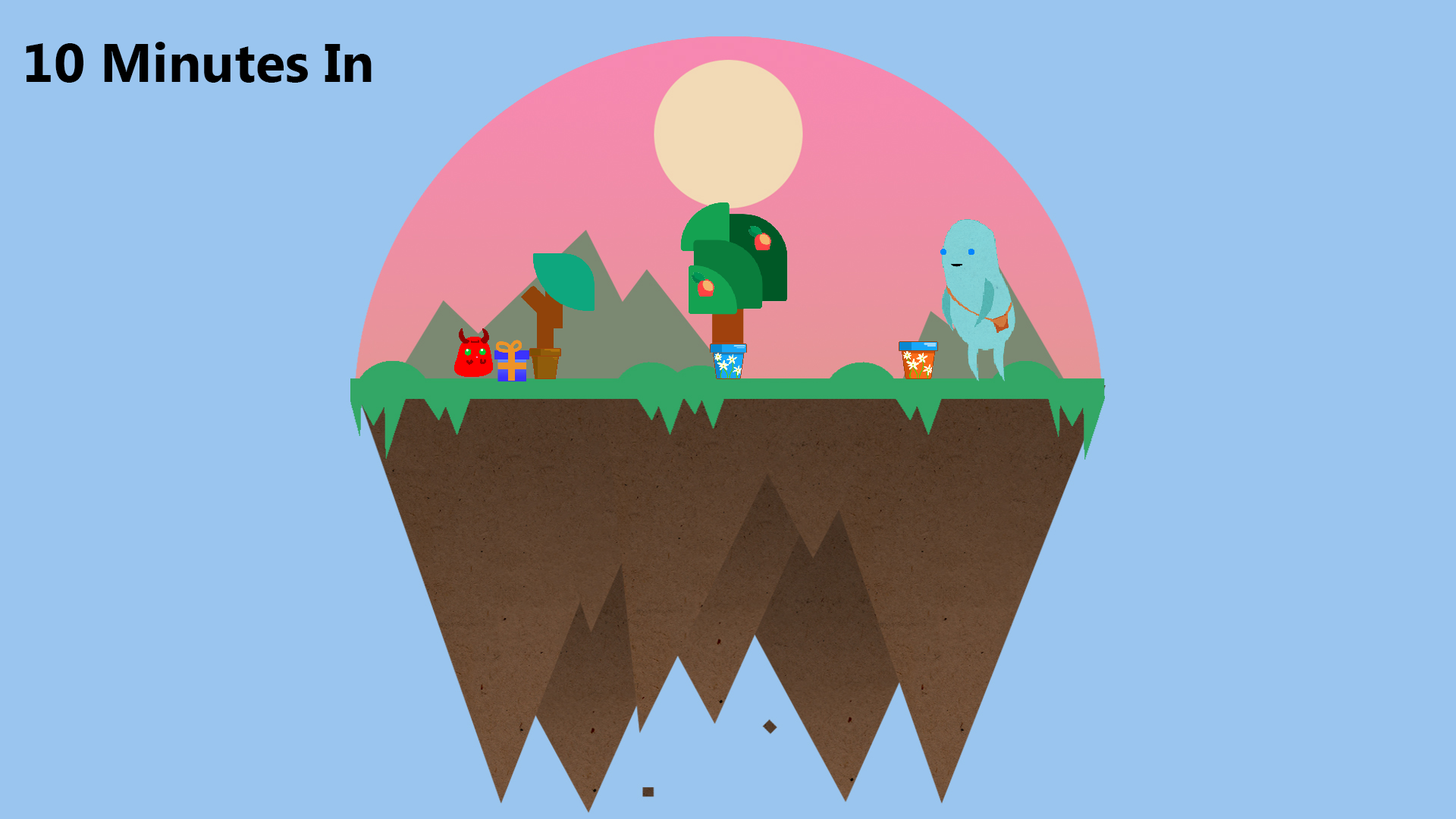
<style>
.page{position:relative;width:1456px;height:819px;background:#9ac5ef}
.page>*{position:absolute;margin:0}
.t1{font:54.6px "MyanmarText-Bold";color:#000000}
</style>
<div class="page">
<p class="t1" style="left:26px;top:42px;width:346px;height:41px">10 Minutes In</p>
</div>
